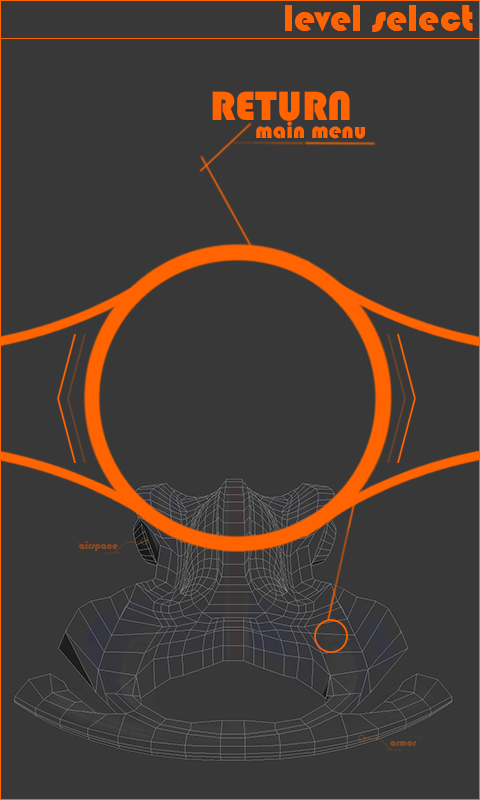
<style>
.page{position:relative;width:480px;height:800px;background:#383838}
.page>*{position:absolute;margin:0}
.t1{font:38.8px "Bauhaus93";color:#ff6400}
.t2{font:42.5px "Bauhaus93";color:#ff6400}
.t3{font:22.9px "Bauhaus93";color:#ff6400}
.t4{font:10.2px "Bauhaus93";color:#8a4a21}
.t5{font:10.2px "Bauhaus93";color:#884a22}
</style>
<div class="page">
<p class="t1" style="left:285px;top:5px;width:188px;height:27px">level select</p>
<p class="t2" style="left:212px;top:91px;width:138px;height:30px">RETURN</p>
<p class="t3" style="left:256px;top:121px;width:109px;height:18px">main menu</p>
<p class="t4" style="left:79px;top:541px;width:39px;height:10px">airspace</p>
<p class="t5" style="left:390px;top:741px;width:27px;height:5px">armor</p>
</div>
